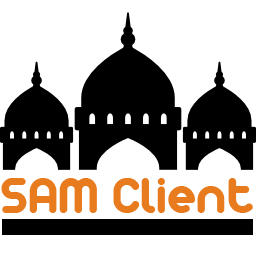
<style>
.page{position:relative;width:256px;height:256px;background:#ffffff}
.page>*{position:absolute;margin:0}
.t1{font:55.5px "Arista2.0";color:#e87b1e}
</style>
<div class="page">
<p class="t1" style="left:1px;top:178px;width:252px;height:35px">SAM Client</p>
</div>
